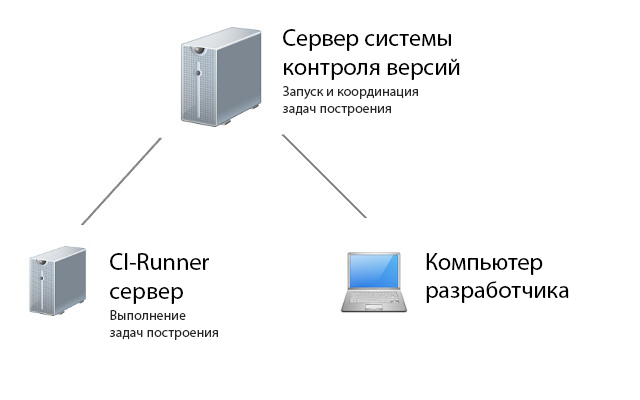
<style>
.page{position:relative;width:640px;height:400px;background:#ffffff}
.page>*{position:absolute;margin:0}
.t1{font:24px "MyriadPro-Regular";color:#000000}
.t2{font:14px "MyriadPro-Regular";color:#262626}
</style>
<div class="page">
<p class="t1" style="left:283px;top:29px;width:177px;height:51px">Сервер системы <br>контроля версий</p>
<p class="t2" style="left:282px;top:86px;width:136px;height:30px">Запуск и координация <br>задач построения</p>
<p class="t1" style="left:110px;top:253px;width:99px;height:51px">CI-Runner <br>сервер</p>
<p class="t1" style="left:426px;top:253px;width:143px;height:50px">Компьютер <br>разработчика</p>
<p class="t2" style="left:109px;top:310px;width:109px;height:30px">Выполнение<br>задач построения</p>
</div>
